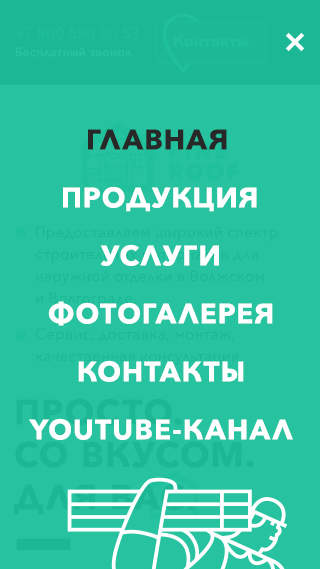
<style>
.page{position:relative;width:320px;height:569px;background:#27c3a0}
.page>*{position:absolute;margin:0}
.t1{font:15px "AvenirNext-Regular";letter-spacing:0.025em;color:#1ebe99}
.t2{font:15px "AvenirNext-Bold";letter-spacing:0.025em;color:#1fc09b}
.t3{font:12px "AvenirNext-Medium";letter-spacing:0.025em;color:#27c3a0}
.t4{font:28px "AvenirNext-Bold";letter-spacing:0.05em;color:#282828;text-transform:uppercase}
.t5{font:28px "AvenirNext-Bold";letter-spacing:0.05em;color:#ffffff;text-transform:uppercase}
</style>
<div class="page">
<p class="t1" style="left:16px;top:27px;width:123px;height:12px">+7 800 550 00 53</p>
<p class="t2" style="left:174px;top:35px;width:75px;height:12px">Контакты</p>
<p class="t3" style="left:16px;top:47px;width:116px;height:10px">Бесплатный звонок</p>
<p class="t4" style="left:88px;top:129px;width:139px;height:21px">главная</p>
<p class="t5" style="left:63px;top:186px;width:194px;height:26px">Продукция</p>
<p class="t5" style="left:100px;top:244px;width:119px;height:22px">Услуги</p>
<p class="t5" style="left:48px;top:301px;width:225px;height:25px">Фотогалерея</p>
<p class="t5" style="left:78px;top:360px;width:166px;height:22px">Контакты</p>
<p class="t5" style="left:29px;top:418px;width:264px;height:22px">YOUTUBE-канал</p>
</div>
